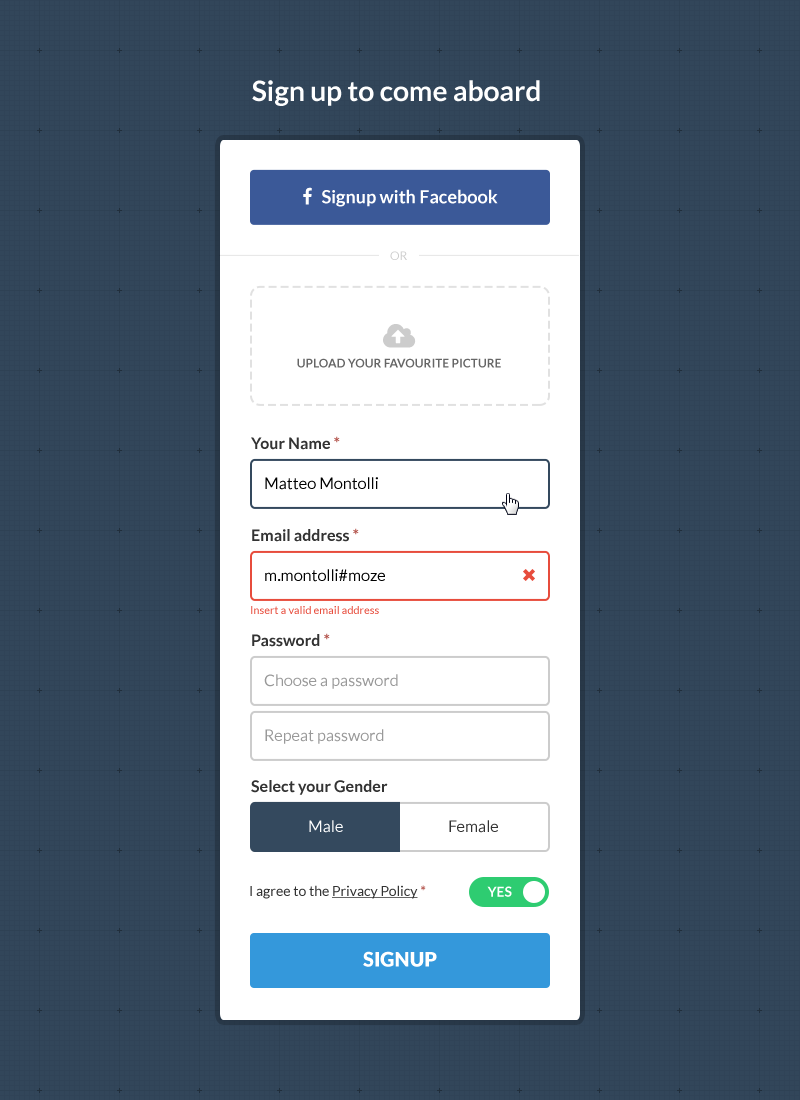
<style>
.page{position:relative;width:800px;height:1100px;background:#32465a}
.page>*{position:absolute;margin:0}
.t1{font:28px "Lato-Bold";color:#ffffff}
.t2{font:12px "Lato-Regular";color:#cccccc}
.t3{font:12px "Lato-Bold";color:#666666;text-transform:uppercase}
.t4{font:16px "Lato-Bold";color:#333333}
.t5{font:16px "Lato-Bold";color:#b3544c}
.t6{font:16px "Lato-Regular";color:#000000}
.t7{font:11px "Lato-Regular";color:#e74c3c}
.t8{font:16px "Lato-Regular";color:#999999}
.t9{font:16px "Lato-Regular";color:#fefefe}
.t10{font:16px "Lato-Regular";color:#333333}
.t11{font:14px "Lato-Regular";color:#333333}
.t12{font:14px "Lato-Regular";color:#333333;text-decoration:underline}
.t13{font:14px "Lato-Bold";color:#b3544c}
.t14{font:14px "Lato-Bold";color:#ffffff}
.t15{font:20px "Lato-Black";color:#ffffff}
</style>
<div class="page">
<p class="t1" style="left:252px;top:80px;width:288px;height:26px">Sign up to come aboard</p>
<p class="t2" style="left:390px;top:251px;width:17px;height:9px">OR</p>
<p class="t3" style="left:297px;top:358px;width:204px;height:10px">upload your favourite picture</p>
<p class="t4" style="left:251px;top:436px;width:89px;height:14px">Your Name <span class="t5">*</span></p>
<p class="t6" style="left:265px;top:477px;width:113px;height:13px">Matteo Montolli</p>
<p class="t4" style="left:252px;top:528px;width:107px;height:14px">Email address <span class="t5">*</span></p>
<p class="t6" style="left:265px;top:569px;width:120px;height:13px">m.montolli#moze</p>
<p class="t7" style="left:251px;top:606px;width:128px;height:8px">Insert a valid email address</p>
<p class="t4" style="left:252px;top:633px;width:78px;height:14px">Password <span class="t5">*</span></p>
<p class="t8" style="left:264px;top:674px;width:134px;height:15px">Choose a password</p>
<p class="t8" style="left:265px;top:729px;width:119px;height:15px">Repeat password</p>
<p class="t4" style="left:251px;top:780px;width:137px;height:15px">Select your Gender</p>
<p class="t9" style="left:309px;top:820px;width:34px;height:13px">Male</p>
<p class="t10" style="left:449px;top:820px;width:49px;height:13px">Female</p>
<p class="t11" style="left:250px;top:885px;width:176px;height:14px">I agree to the <span class="t12">Privacy Policy </span><span class="t13">*</span></p>
<p class="t14" style="left:487px;top:886px;width:25px;height:11px">YES</p>
<p class="t15" style="left:363px;top:951px;width:74px;height:16px">SIGNUP</p>
</div>
